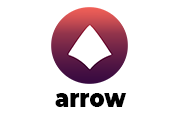
<style>
.page{position:relative;width:180px;height:120px;background:#ffffff}
.page>*{position:absolute;margin:0}
.t1{font:24.1px "Montserrat-Black";color:#000000;scale:0.92 1}
</style>
<div class="page">
<p class="t1" style="left:55px;top:93px;width:72px;height:14px">arrow</p>
</div>
